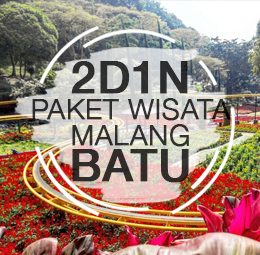
<style>
.page{position:relative;width:260px;height:255px}
.page>*{position:absolute;margin:0}
.t1{font:28.5px/25.7px "HelveticaNeue-Light";color:#2f2d2c;font-weight:bold}
.t2{font:45.3px/25.7px "HelveticaNeue-Medium";color:#2f2d2c;font-weight:bold}
.t3{font:45.3px/36.5px "HelveticaNeue-Medium";color:#2f2d2c;font-weight:bold}
</style>
<div class="page">
<p class="t1" style="left:32px;top:61px;width:199px;height:122px;text-align:center"><span class="t2">2D1N<br></span>PAKET WISATA<br>MALANG<br><span class="t3">BATU</span></p>
</div>
